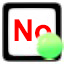
<style>
.page{position:relative;width:64px;height:64px}
.page>*{position:absolute;margin:0}
.t1{font:30px "Arial-BoldMT";color:#ff0000}
</style>
<div class="page">
<p class="t1" style="left:14px;top:19px;width:38px;height:23px">No</p>
</div>
